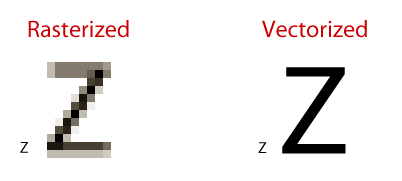
<style>
.page{position:relative;width:402px;height:181px;background:#ffffff}
.page>*{position:absolute;margin:0}
.t1{font:24px "MyriadPro-Regular";color:#cc0000}
.t2{font:128px "MyriadPro-Regular";color:#000000}
.t3{font:16px "MyriadPro-Regular";color:#000000}
</style>
<div class="page">
<p class="t1" style="left:28px;top:20px;width:101px;height:18px">Rasterized</p>
<p class="t1" style="left:262px;top:20px;width:105px;height:18px">Vectorized</p>
<p class="t2" style="left:282px;top:67px;width:64px;height:87px">Z</p>
<p class="t3" style="left:20px;top:142px;width:8px;height:11px">Z</p>
<p class="t3" style="left:258px;top:142px;width:9px;height:11px">Z</p>
</div>
